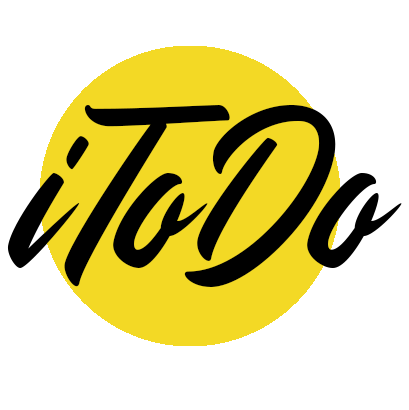
<style>
.page{position:relative;width:409px;height:410px;background:#ffffff}
.page>*{position:absolute;margin:0}
.t1{font:190px "Quadrone";color:#000000;font-style:italic}
</style>
<div class="page">
<p class="t1" style="left:7px;top:105px;width:395px;height:182px">iToDo</p>
</div>
